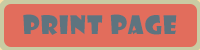
<style>
.page{position:relative;width:200px;height:50px;background:#e26d5c}
.page>*{position:absolute;margin:0}
.t1{font:25px "ShowcardGothic-Reg";letter-spacing:0.05em;color:#5e747f}
</style>
<div class="page">
<p class="t1" style="left:23px;top:14px;width:154px;height:21px">Print Page</p>
</div>
